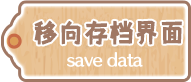
<style>
.page{position:relative;width:191px;height:82px}
.page>*{position:absolute;margin:0}
.t1{font:26.1px "shetumodengxiaofangti";color:#a07864;font-weight:bold;scale:0.94 1}
</style>
<div class="page">
<p class="t1" style="left:34px;top:20px;width:148px;height:25px">移向存档界面</p>
</div>
